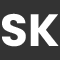
<style>
.page{position:relative;width:60px;height:60px;background:#333333}
.page>*{position:absolute;margin:0}
.t1{font:45.2px "Poppins-Bold";color:#ffffff}
</style>
<div class="page">
<p class="t1" style="left:2px;top:13px;width:57px;height:34px">SK</p>
</div>
